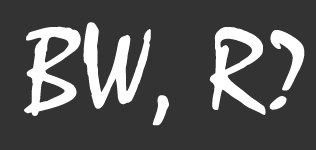
<style>
.page{position:relative;width:316px;height:150px;background:#333333}
.page>*{position:absolute;margin:0}
.t1{font:120px "Mistral";color:#ffffff}
</style>
<div class="page">
<p class="t1" style="left:24px;top:22px;width:281px;height:104px">BW, R?</p>
</div>
